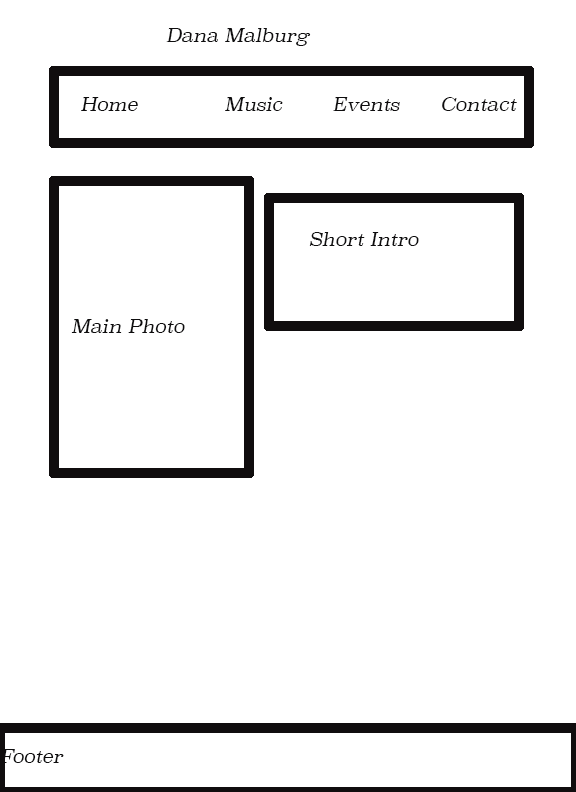
<style>
.page{position:relative;width:576px;height:792px;background:#ffffff}
.page>*{position:absolute;margin:0}
.t1{font:18px "Superclarendon-LightItalic";color:#0e0d0e}
</style>
<div class="page">
<p class="t1" style="left:166px;top:28px;width:145px;height:18px">Dana Malburg</p>
<p class="t1" style="left:81px;top:97px;width:436px;height:14px">Home   Music  Events  Contact</p>
<p class="t1" style="left:309px;top:232px;width:110px;height:14px">Short Intro</p>
<p class="t1" style="left:71px;top:319px;width:114px;height:14px">Main Photo</p>
<p class="t1" style="left:0px;top:749px;width:64px;height:14px">Footer</p>
</div>
